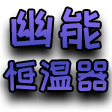
<style>
.page{position:relative;width:112px;height:112px}
.page>*{position:absolute;margin:0}
.t1{font:36px "HappyZcool-2016";color:#6158ce}
.t2{font:48px "HappyZcool-2016";color:#6158ce}
</style>
<div class="page">
<p class="t1" style="left:4px;top:8px;width:103px;height:83px;text-align:center"><span class="t2">幽能<br></span>恒温器</p>
</div>
